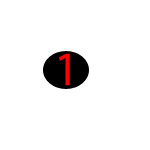
<style>
.page{position:relative;width:150px;height:150px;background:#ffffff}
.page>*{position:absolute;margin:0}
.t1{font:48px "MyriadPro-Regular";color:#fe0000}
</style>
<div class="page">
<p class="t1" style="left:59px;top:53px;width:11px;height:33px">1</p>
</div>
